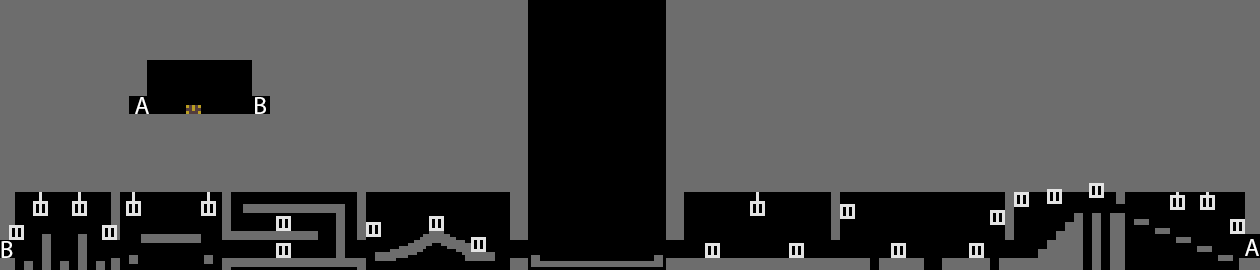
<style>
.page{position:relative;width:1260px;height:270px;background:#6d6d6d}
.page>*{position:absolute;margin:0}
.t1{font:25px "MyriadPro-Regular";color:#fefefe}
</style>
<div class="page">
<p class="t1" style="left:135px;top:97px;width:14px;height:17px">A</p>
<p class="t1" style="left:255px;top:97px;width:11px;height:17px">B</p>
<p class="t1" style="left:1px;top:241px;width:12px;height:17px">B</p>
<p class="t1" style="left:1245px;top:239px;width:14px;height:17px">A</p>
</div>
